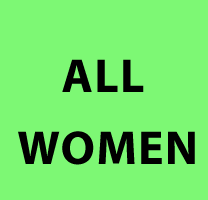
<style>
.page{position:relative;width:208px;height:200px;background:#7df874}
.page>*{position:absolute;margin:0}
.t1{font:48px/18px "MyriadPro-Bold";letter-spacing:0.025em;color:#000000;text-transform:uppercase}
</style>
<div class="page">
<p class="t1" style="left:18px;top:59px;width:177px;height:106px;text-align:center">all<br><br><br><br> women</p>
</div>
